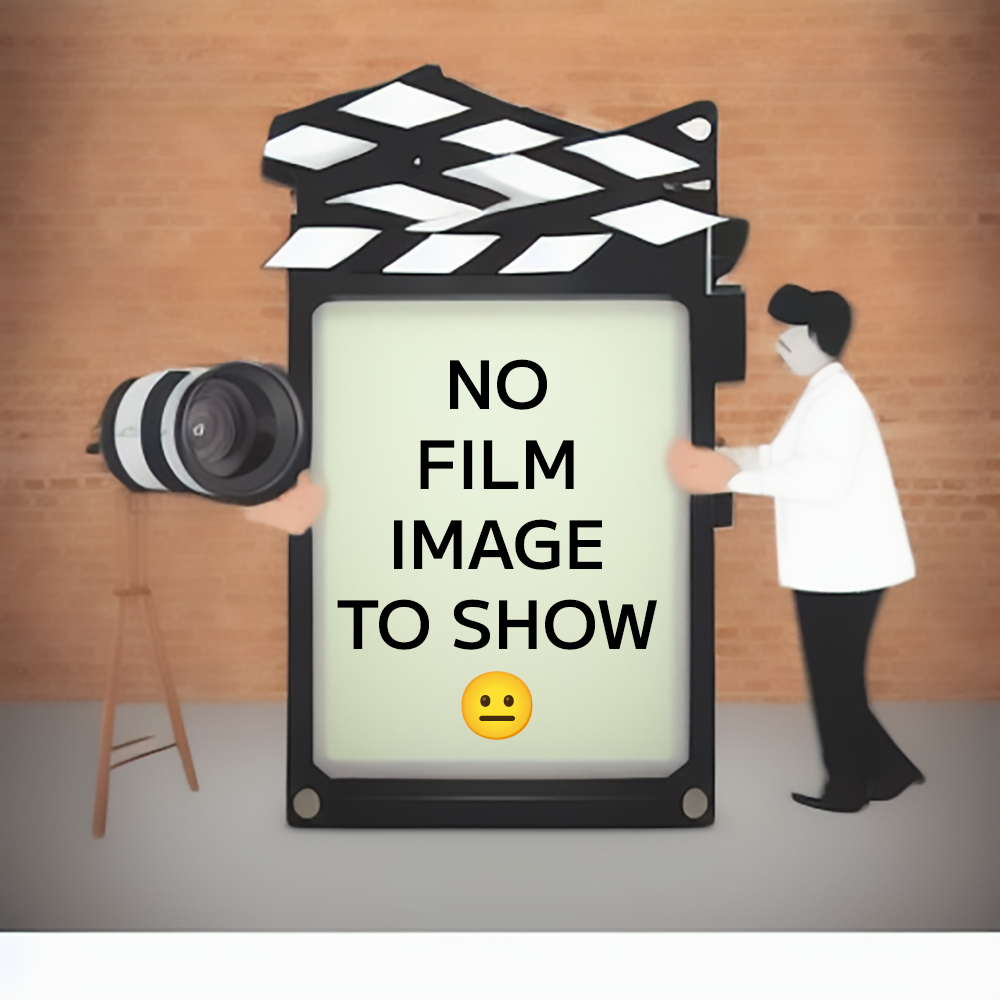
<style>
.page{position:relative;width:1000px;height:1000px}
.page>*{position:absolute;margin:0}
.t1{font:66.7px "MPLUS1-SemiBold";color:#000000;text-transform:uppercase}
.t2{font:66.7px "NotoColorEmoji-SVG";color:#000000;text-transform:uppercase}
</style>
<div class="page">
<p class="t1" style="left:337px;top:359px;width:320px;height:381px;text-align:center">No<br>film<br>Image<br>to Show<br><span class="t2">😐</span></p>
</div>
